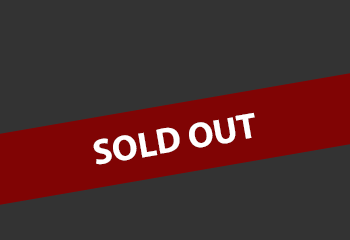
<style>
.page{position:relative;width:350px;height:240px;background:#333333}
.page>*{position:absolute;margin:0}
.t1{font:36px "MyriadPro-Bold";color:#ffffff}
</style>
<div class="page">
<p class="t1" style="left:93px;top:112px;width:162px;height:53px;rotate:-10deg">SOLD OUT</p>
</div>
